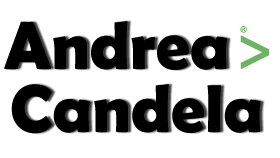
<style>
.page{position:relative;width:280px;height:158px;background:#ffffff}
.page>*{position:absolute;margin:0}
.t1{font:68px "BerlinSansFBDemi-Bold";color:#000000}
</style>
<div class="page">
<p class="t1" style="left:4px;top:21px;width:224px;height:49px">Andrea</p>
<p class="t1" style="left:11px;top:84px;width:250px;height:50px">Candela</p>
</div>
